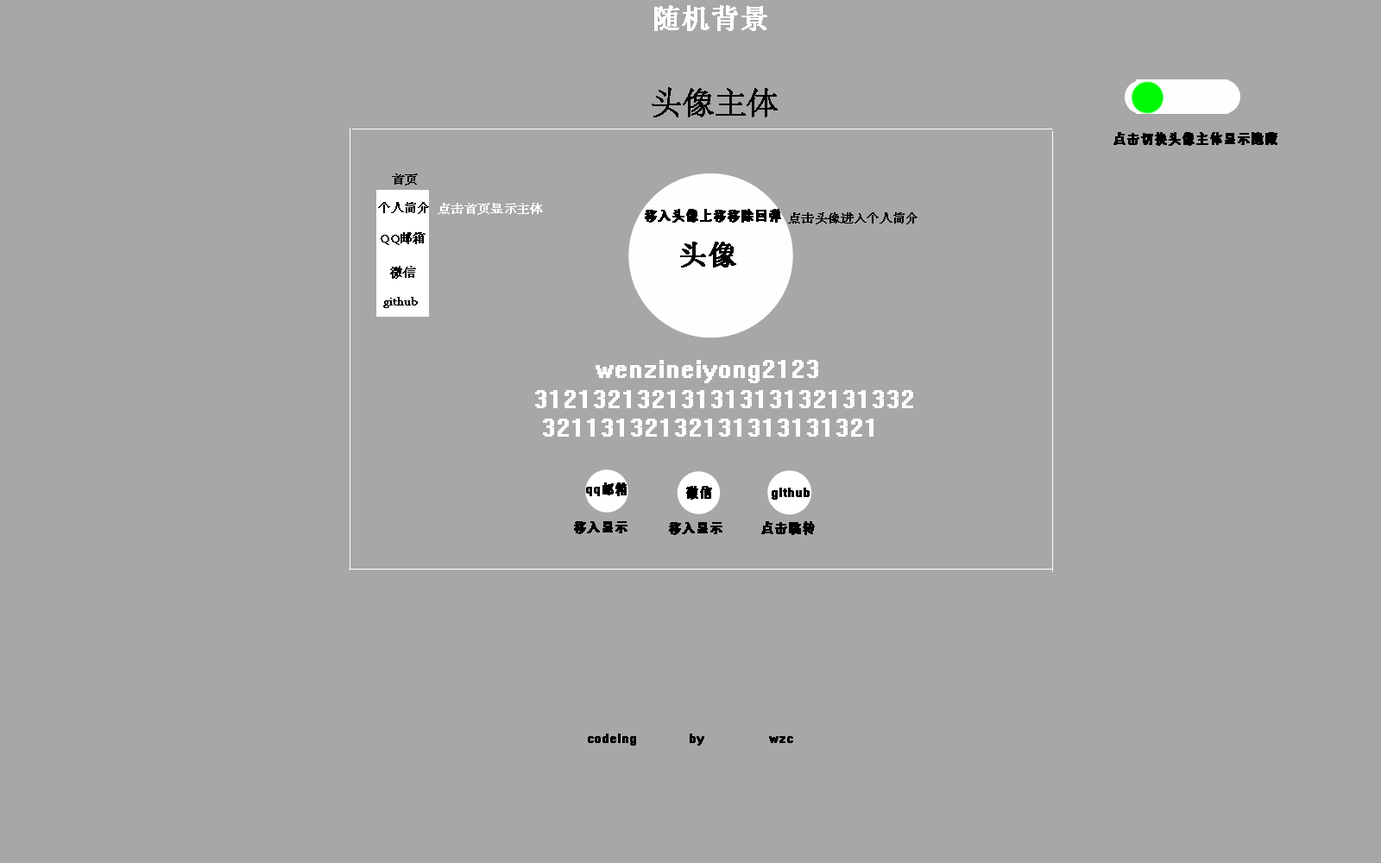
<style>
.page{position:relative;width:1381px;height:863px;background:#a8a7a7}
.page>*{position:absolute;margin:0}
.t1{font:31.1px "System";color:#ffffff;font-weight:bold}
.t2{font:31.1px "AdobeSongStd-Light";color:#000000;font-weight:bold}
.t3{font:20.7px "System";color:#000000;font-weight:bold}
.t4{font:12.1px "AdobeSongStd-Light";color:#000000;font-weight:bold}
.t5{font:12.1px "AdobeSongStd-Light";color:#ffffff;font-weight:bold}
.t6{font:24.2px "System";color:#000000;font-weight:bold}
.t7{font:31.1px "System";color:#010101;font-weight:bold}
.t8{font:31.1px "System";color:#fefefe;font-weight:bold}
</style>
<div class="page">
<p class="t1" style="left:654px;top:5px;width:113px;height:26px">随机背景</p>
<p class="t2" style="left:652px;top:87px;width:126px;height:30px">头像主体</p>
<p class="t3" style="left:1114px;top:132px;width:164px;height:14px">点击切换头像主体显示隐藏</p>
<p class="t4" style="left:392px;top:174px;width:26px;height:12px">首页</p>
<p class="t4" style="left:378px;top:202px;width:51px;height:12px">个人简介</p>
<p class="t5" style="left:438px;top:203px;width:105px;height:12px">点击首页显示主体</p>
<p class="t6" style="left:645px;top:209px;width:136px;height:14px">移入头像上移移除回弹</p>
<p class="t4" style="left:788px;top:212px;width:130px;height:12px">点击头像进入个人简介</p>
<p class="t4" style="left:381px;top:232px;width:45px;height:13px">QQ邮箱</p>
<p class="t7" style="left:680px;top:242px;width:56px;height:26px">头像</p>
<p class="t4" style="left:390px;top:266px;width:26px;height:13px">微信</p>
<p class="t4" style="left:383px;top:297px;width:35px;height:11px">github</p>
<p class="t8" style="left:596px;top:360px;width:222px;height:23px">wenzineiyong2123</p>
<p class="t8" style="left:535px;top:390px;width:378px;height:18px">31213213213131313132131332</p>
<p class="t8" style="left:543px;top:419px;width:331px;height:18px">32113132132131313131321</p>
<p class="t3" style="left:586px;top:483px;width:41px;height:13px">qq邮箱</p>
<p class="t3" style="left:686px;top:486px;width:26px;height:14px">微信</p>
<p class="t3" style="left:772px;top:488px;width:38px;height:12px">github</p>
<p class="t3" style="left:574px;top:521px;width:54px;height:13px">移入显示</p>
<p class="t3" style="left:761px;top:521px;width:54px;height:14px">点击跳转</p>
<p class="t3" style="left:669px;top:522px;width:54px;height:13px">移入显示</p>
<p class="t3" style="left:588px;top:734px;width:205px;height:12px">codeing            by               wzc</p>
</div>
